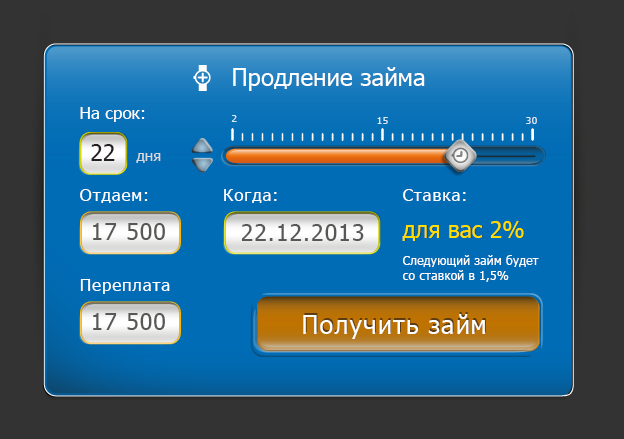
<style>
.page{position:relative;width:624px;height:439px;background:#333333}
.page>*{position:absolute;margin:0}
.t1{font:24px "Tahoma";color:#ffffff}
.t2{font:17px "Tahoma";color:#ffffff}
.t3{font:10px "Tahoma";letter-spacing:0.05em;color:#dee7f2}
.t4{font:15px "Tahoma";color:#d9d9d9}
.t5{font:22.8px "Tahoma";color:#231f20}
.t6{font:17px "Tahoma";letter-spacing:0.05em;color:#ffffff}
.t7{font:23px "Tahoma";color:#ffdd00}
.t8{font:22.8px "Tahoma";letter-spacing:0.05em;color:#575756}
.t9{font:12px/15.1px "Tahoma";letter-spacing:0.025em;color:#ffffff}
.t10{font:24.9px "Tahoma";letter-spacing:0.05em;color:#ffffff}
.t11{font:24.9px "Tahoma";letter-spacing:0.05em}
</style>
<div class="page">
<p class="t1" style="left:233px;top:67px;width:192px;height:24px">Продление займа</p>
<p class="t2" style="left:80px;top:107px;width:65px;height:15px">На срок:</p>
<p class="t3" style="left:231px;top:115px;width:6px;height:7px">2</p>
<p class="t3" style="left:377px;top:117px;width:11px;height:7px">15</p>
<p class="t3" style="left:526px;top:117px;width:11px;height:7px">30</p>
<p class="t4" style="left:91px;top:144px;width:70px;height:19px"><span class="t5">22   </span>дня</p>
<p class="t6" style="left:80px;top:189px;width:68px;height:14px">Отдаем:</p>
<p class="t6" style="left:224px;top:189px;width:53px;height:14px">Когда:</p>
<p class="t6" style="left:403px;top:189px;width:63px;height:12px">Ставка:</p>
<p class="t7" style="left:402px;top:221px;width:122px;height:20px">для вас 2%</p>
<p class="t7" style="left:403px;top:221px;width:122px;height:20px">для вас 2%</p>
<p class="t8" style="left:93px;top:223px;width:72px;height:17px">17 500</p>
<p class="t8" style="left:241px;top:224px;width:123px;height:17px">22.12.2013</p>
<p class="t9" style="left:403px;top:255px;width:136px;height:27px">Следующий займ будет<br>со ставкой в 1,5%</p>
<p class="t6" style="left:80px;top:279px;width:90px;height:15px">Переплата</p>
<p class="t8" style="left:93px;top:313px;width:72px;height:17px">17 500</p>
<p class="t10" style="left:303px;top:314px;width:182px;height:25px">Получить займ</p>
<p class="t11" style="left:304px;top:312px;width:182px;height:25px">Получить займ</p>
</div>
